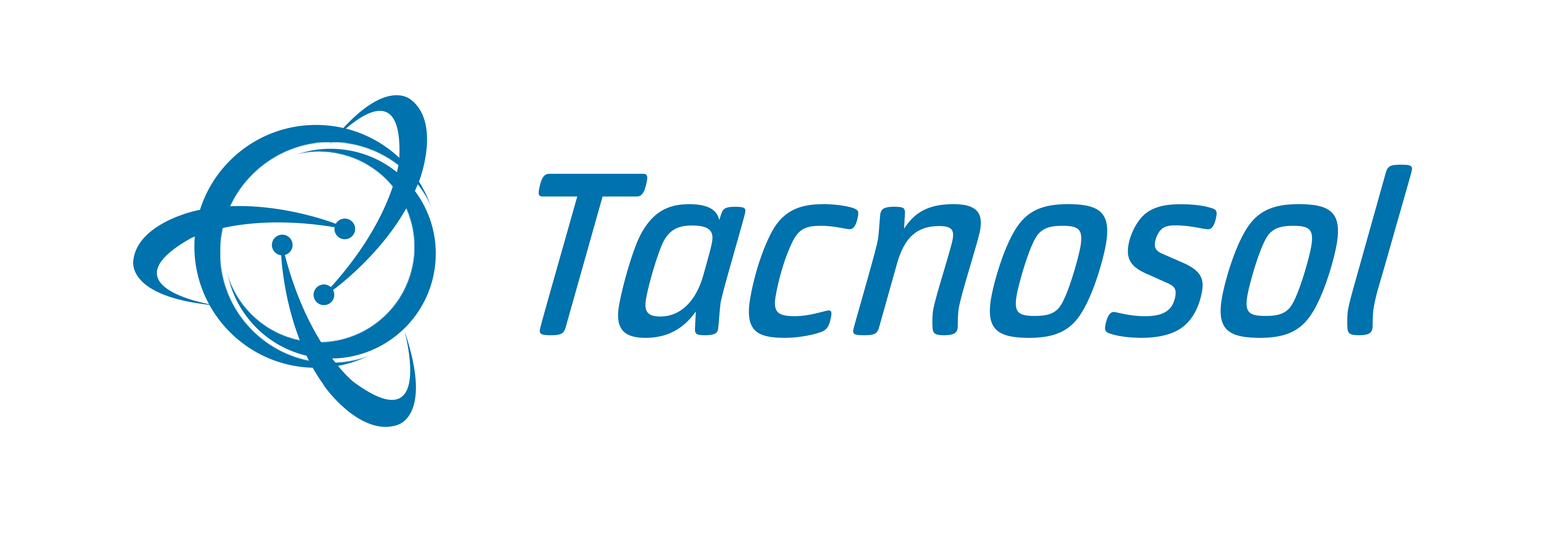
<style>
.page{position:relative;width:1568px;height:541px;background:#ffffff}
.page>*{position:absolute;margin:0}
.t1{font:261.2px "Neuron-DemiBoldItalic";color:#0072ad;font-style:italic}
</style>
<div class="page">
<p class="t1" style="left:539px;top:165px;width:873px;height:173px">Tacnosol</p>
</div>
